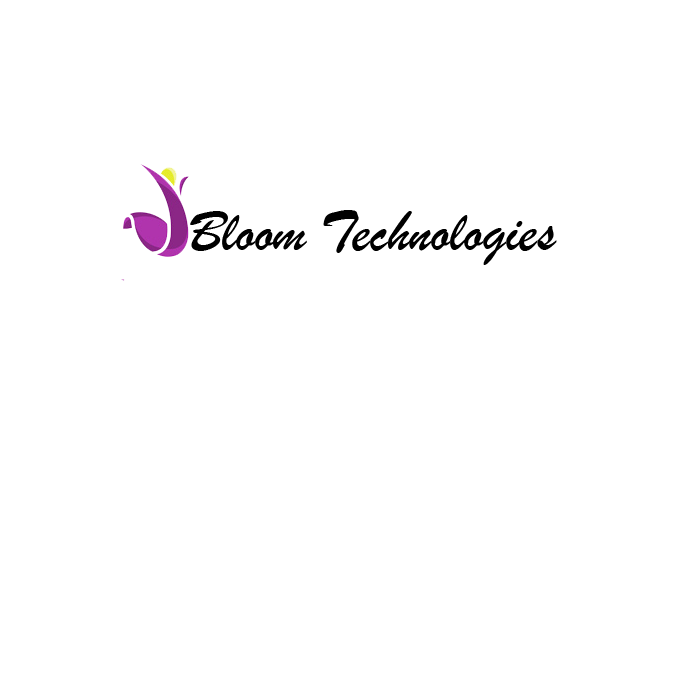
<style>
.page{position:relative;width:700px;height:700px;background:#ffffff}
.page>*{position:absolute;margin:0}
.t1{font:60px "BrushScriptMT";color:#000000}
</style>
<div class="page">
<p class="t1" style="left:190px;top:210px;width:367px;height:55px">Bloom Technologies</p>
</div>
